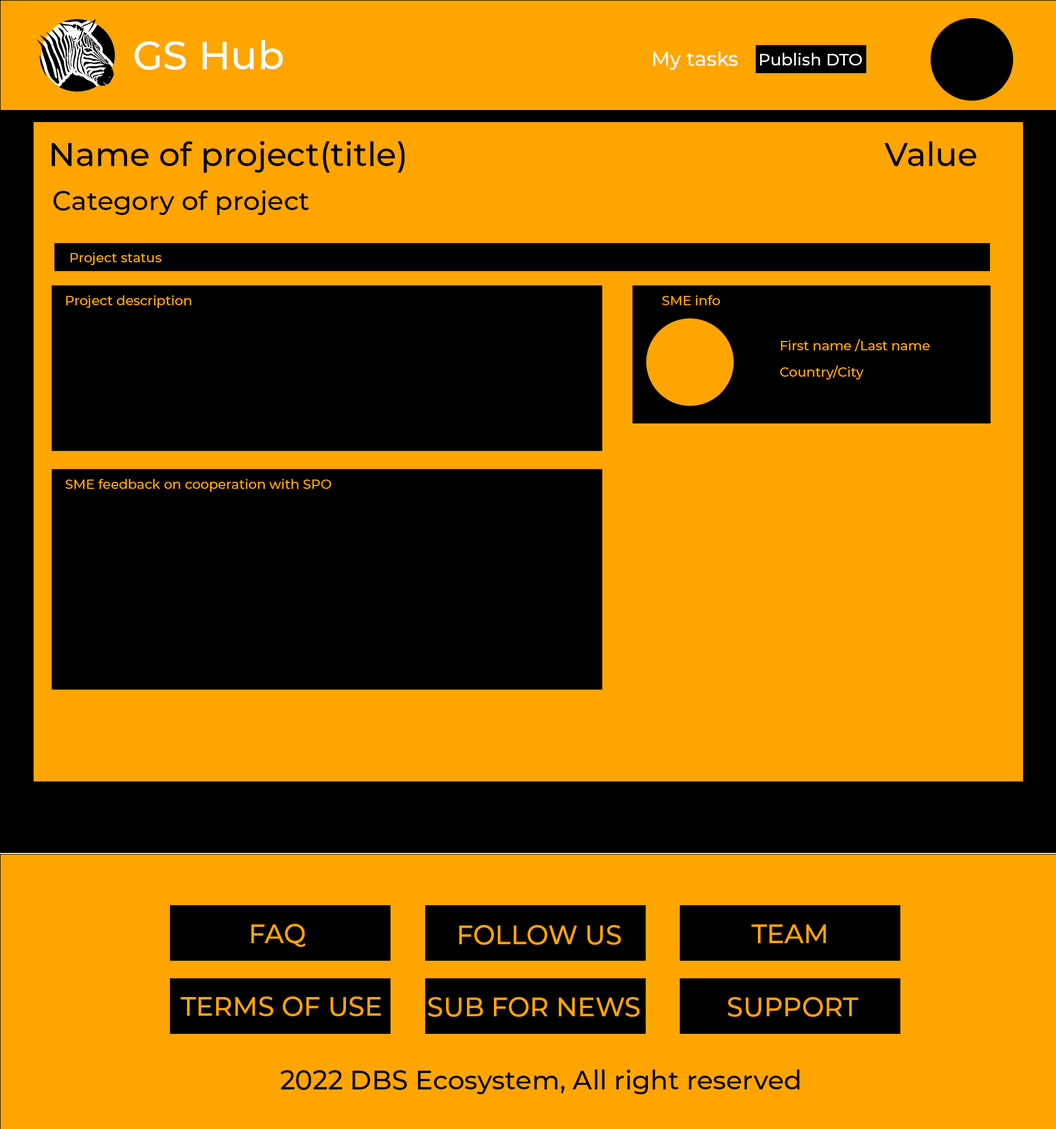
<style>
.page{position:relative;width:1056px;height:1129px;background:#ffa500}
.page>*{position:absolute;margin:0}
.t1{font:39.6px "Montserrat-Medium";color:#ffffff}
.t2{font:19.8px "Montserrat-Medium";color:#ffffff}
.t3{font:16.5px "Montserrat-Medium";color:#ffffff}
.t4{font:33px "Montserrat-Medium";color:#000000}
.t5{font:26.4px "Montserrat-Medium";color:#000000}
.t6{font:13.2px "Montserrat-Medium";color:#ffa500}
.t7{font:13.2px/8.8px "Montserrat-Medium";color:#ffa500}
.t8{font:26.4px "Montserrat-Medium";color:#ffa500}
</style>
<div class="page">
<p class="t1" style="left:134px;top:40px;width:149px;height:30px">GS Hub</p>
<p class="t2" style="left:653px;top:51px;width:85px;height:19px">My tasks</p>
<p class="t3" style="left:760px;top:53px;width:102px;height:12px">Publish DTO</p>
<p class="t4" style="left:52px;top:141px;width:353px;height:32px">Name of project(title)</p>
<p class="t4" style="left:884px;top:141px;width:92px;height:25px">Value</p>
<p class="t5" style="left:53px;top:190px;width:256px;height:25px">Category of project</p>
<p class="t6" style="left:70px;top:252px;width:92px;height:13px">Project status</p>
<p class="t6" style="left:66px;top:295px;width:125px;height:13px">Project description</p>
<p class="t6" style="left:662px;top:295px;width:58px;height:10px">SME info</p>
<p class="t7" style="left:780px;top:339px;width:150px;height:41px;text-align:justify">First name /Last name<br><br><br>Country/City</p>
<p class="t6" style="left:65px;top:479px;width:266px;height:13px">SME feedback on cooperation with SPO</p>
<p class="t8" style="left:251px;top:924px;width:55px;height:23px">FAQ</p>
<p class="t8" style="left:459px;top:925px;width:162px;height:20px">FOLLOW US</p>
<p class="t8" style="left:751px;top:925px;width:75px;height:18px">TEAM</p>
<p class="t8" style="left:180px;top:997px;width:201px;height:19px">TERMS OF USE</p>
<p class="t8" style="left:428px;top:997px;width:212px;height:20px">SUB FOR NEWS</p>
<p class="t8" style="left:728px;top:997px;width:131px;height:20px">SUPPORT</p>
<p class="t5" style="left:281px;top:1070px;width:519px;height:25px">2022 DBS Ecosystem, All right reserved</p>
</div>
